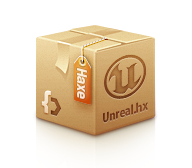
<style>
.page{position:relative;width:192px;height:168px;background:#ffffff}
.page>*{position:absolute;margin:0}
.t1{font:16px "BreuerText-Bold";letter-spacing:-0.01em;color:#faeadb;scale:0.96 1}
.t2{font:14px "MyriadPro-Bold";letter-spacing:-0.015em;color:#773a1b;scale:0.81 1}
</style>
<div class="page">
<p class="t1" style="left:77px;top:68px;width:10px;height:31px;rotate:90deg">Haxe</p>
<p class="t2" style="left:103px;top:102px;width:45px;height:21px;rotate:-16deg">Unreal.hx</p>
</div>
